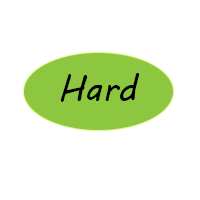
<style>
.page{position:relative;width:200px;height:200px;background:#ffffff}
.page>*{position:absolute;margin:0}
.t1{font:36px "MVBoli";color:#000000}
</style>
<div class="page">
<p class="t1" style="left:60px;top:73px;width:80px;height:29px">Hard</p>
</div>
